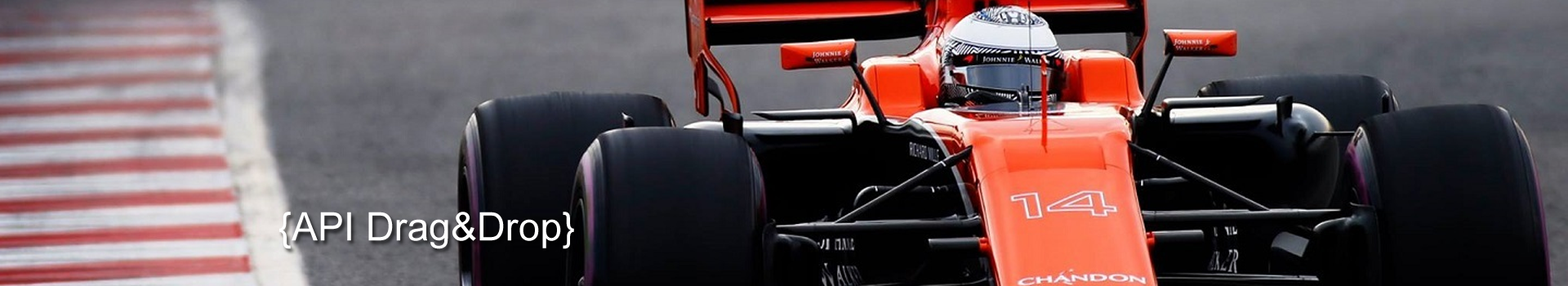
<style>
.page{position:relative;width:1568px;height:286px}
.page>*{position:absolute;margin:0}
.t1{font:39.2px "ArialMT";color:#ffffff}
</style>
<div class="page">
<p class="t1" style="left:279px;top:212px;width:295px;height:37px">{API Drag&amp;Drop}</p>
</div>
